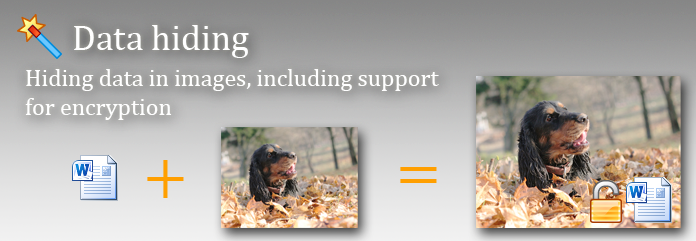
<style>
.page{position:relative;width:696px;height:241px}
.page>*{position:absolute;margin:0}
.t1{font:36px "CambriaMath";color:#ffffff}
.t2{font:24px "CambriaMath";color:#ffffff}
.t3{font:60px "CambriaMath";color:#ff9f00}
</style>
<div class="page">
<p class="t1" style="left:74px;top:25px;width:175px;height:33px">Data hiding</p>
<p class="t2" style="left:25px;top:69px;width:414px;height:51px">Hiding data in images, including support for encryption</p>
<p class="t3" style="left:147px;top:160px;width:37px;height:38px">+</p>
<p class="t3" style="left:400px;top:167px;width:37px;height:16px">=</p>
</div>
